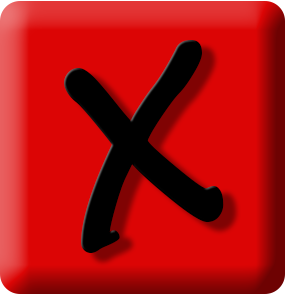
<style>
.page{position:relative;width:285px;height:295px;background:#dc0505}
.page>*{position:absolute;margin:0}
.t1{font:311px "Andy-Bold";color:#000000;font-variant:small-caps}
</style>
<div class="page">
<p class="t1" style="left:64px;top:40px;width:160px;height:213px">X</p>
</div>
